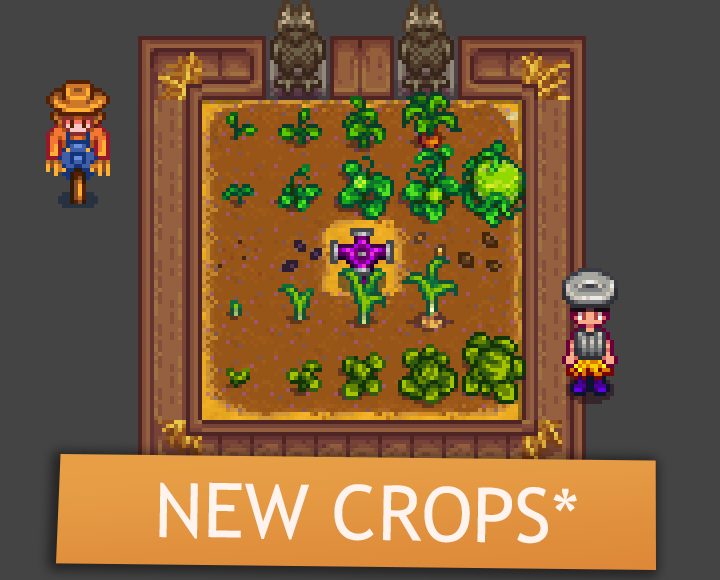
<style>
.page{position:relative;width:720px;height:580px;background:#444444}
.page>*{position:absolute;margin:0}
.t1{font:76px "TrebuchetMS";color:#fff3ed}
</style>
<div class="page">
<p class="t1" style="left:159px;top:482px;width:418px;height:62px;rotate:1deg">NEW CROPS*</p>
</div>
